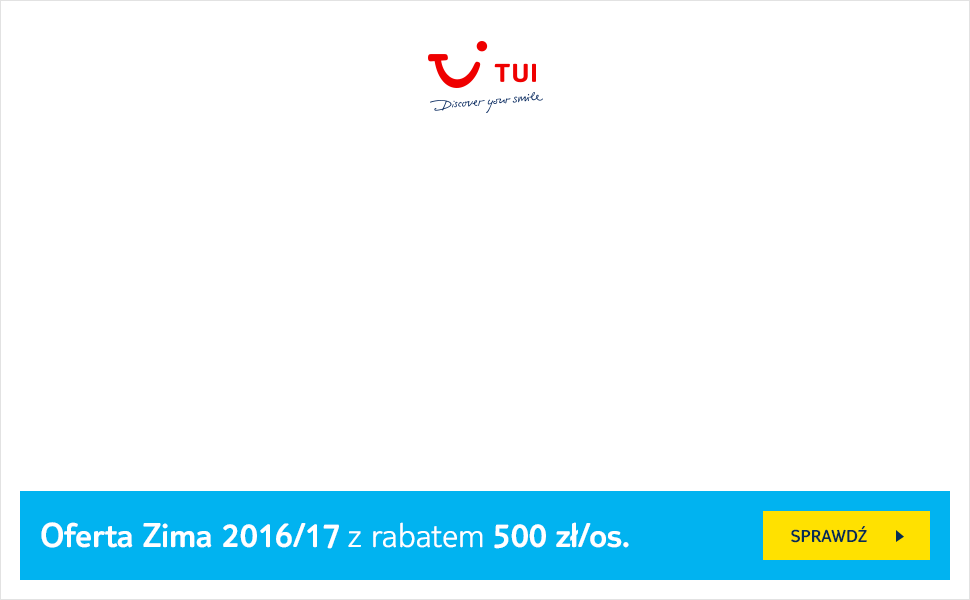
<style>
.page{position:relative;width:970px;height:600px;background:#ffffff}
.page>*{position:absolute;margin:0}
.t1{font:36px "TUITypeLight-Bold";color:#ffffff}
.t2{font:36px "TUITypeLight-Regular";color:#ffffff}
.t3{font:18px "TUITypeLight-Bold";color:#072e52}
</style>
<div class="page">
<p class="t1" style="left:41px;top:522px;width:588px;height:27px">Oferta Zima 2016/17 <span class="t2">z rabatem </span>500 zł/os.</p>
<p class="t3" style="left:791px;top:526px;width:76px;height:17px">SPRAWDŹ</p>
</div>
